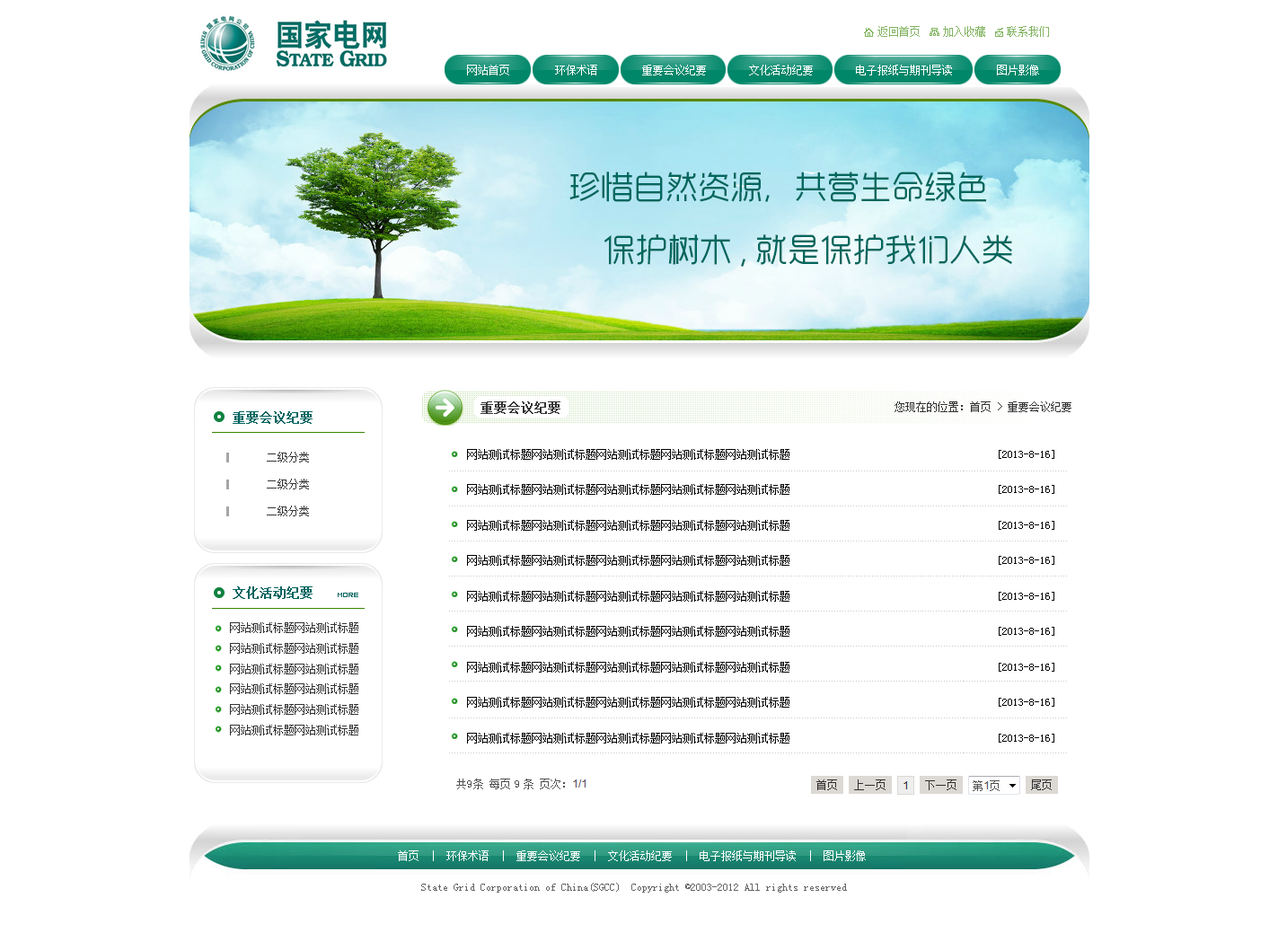
<style>
.page{position:relative;width:1278px;height:933px;background:#ffffff}
.page>*{position:absolute;margin:0}
.t1{font:10.8px "SimSun";color:#ffffff}
.t2{font:32.3px "RTWSYueGoTrial-Regular";color:#00675d}
.t3{font:12.6px "SimSun";color:#333333;font-weight:bold}
.t4{font:10.8px "SimSun";color:#333333}
.t5{font:12.6px "SimSun";color:#00645f;font-weight:bold}
.t6{font:10.8px/35.5px "SimSun";color:#000000}
.t7{font:10.8px/26.9px "SimSun";color:#333333}
.t8{font:7.2px "04b08";color:#00645f}
.t9{font:10.8px "SimSun";color:#505050}
.t10{font:10.8px "SimSun";color:#666666}
</style>
<div class="page">
<p class="t1" style="left:467px;top:65px;width:42px;height:10px">网站首页</p>
<p class="t1" style="left:555px;top:65px;width:42px;height:10px">环保术语</p>
<p class="t1" style="left:642px;top:65px;width:64px;height:10px">重要会议纪要</p>
<p class="t1" style="left:749px;top:65px;width:64px;height:10px">文化活动纪要</p>
<p class="t1" style="left:856px;top:65px;width:96px;height:10px">电子报纸与期刊导读</p>
<p class="t1" style="left:997px;top:65px;width:42px;height:10px">图片影像</p>
<p class="t2" style="left:569px;top:172px;width:417px;height:30px">珍惜自然资源，共营生命绿色</p>
<p class="t2" style="left:603px;top:234px;width:409px;height:33px">保护树木,就是保护我们人类</p>
<p class="t3" style="left:480px;top:401px;width:80px;height:13px">重要会议纪要</p>
<p class="t4" style="left:894px;top:401px;width:177px;height:11px">您现在的位置：首页 &gt; 重要会议纪要</p>
<p class="t5" style="left:233px;top:411px;width:80px;height:13px">重要会议纪要</p>
<p class="t6" style="left:467px;top:449px;width:322px;height:295px">网站测试标题网站测试标题网站测试标题网站测试标题网站测试标题<br>网站测试标题网站测试标题网站测试标题网站测试标题网站测试标题<br>网站测试标题网站测试标题网站测试标题网站测试标题网站测试标题<br>网站测试标题网站测试标题网站测试标题网站测试标题网站测试标题<br>网站测试标题网站测试标题网站测试标题网站测试标题网站测试标题<br>网站测试标题网站测试标题网站测试标题网站测试标题网站测试标题<br>网站测试标题网站测试标题网站测试标题网站测试标题网站测试标题<br>网站测试标题网站测试标题网站测试标题网站测试标题网站测试标题<br>网站测试标题网站测试标题网站测试标题网站测试标题网站测试标题</p>
<p class="t6" style="left:999px;top:450px;width:55px;height:293px">[2013-8-16]<br>[2013-8-16]<br>[2013-8-16]<br>[2013-8-16]<br>[2013-8-16]<br>[2013-8-16]<br>[2013-8-16]<br>[2013-8-16]<br>[2013-8-16]</p>
<p class="t7" style="left:267px;top:452px;width:42px;height:64px">二级分类<br>二级分类<br>二级分类</p>
<p class="t5" style="left:233px;top:586px;width:80px;height:13px">文化活动纪要</p>
<p class="t8" style="left:338px;top:593px;width:20px;height:4px">more</p>
<p class="t9" style="left:467px;top:780px;width:4px;height:8px">9</p>
<p class="t9" style="left:515px;top:780px;width:4px;height:8px">9</p>
<p class="t1" style="left:398px;top:850px;width:468px;height:11px">首页  |  环保术语  |  重要会议纪要  |  文化活动纪要  |  电子报纸与期刊导读  |  图片影像</p>
<p class="t10" style="left:421px;top:883px;width:426px;height:10px">State Grid Corporation of China(SGCC)  Copyright ©2003-2012 All rights reserved</p>
</div>
